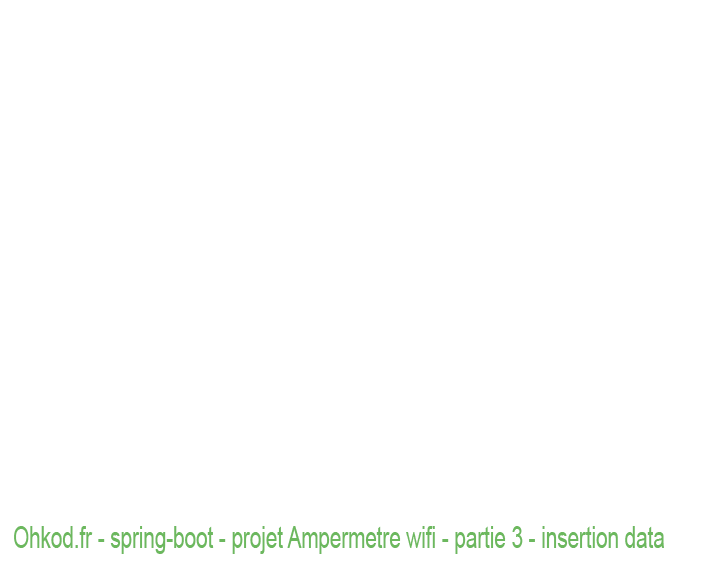
<style>
.page{position:relative;width:720px;height:576px;background:#ffffff}
.page>*{position:absolute;margin:0}
.t1{font:30px "ArialMT";color:#6cb85e;scale:0.69 1}
</style>
<div class="page">
<p class="t1" style="left:14px;top:526px;width:650px;height:28px">Ohkod.fr - spring-boot - projet Ampermetre wifi - partie 3 - insertion data</p>
</div>
